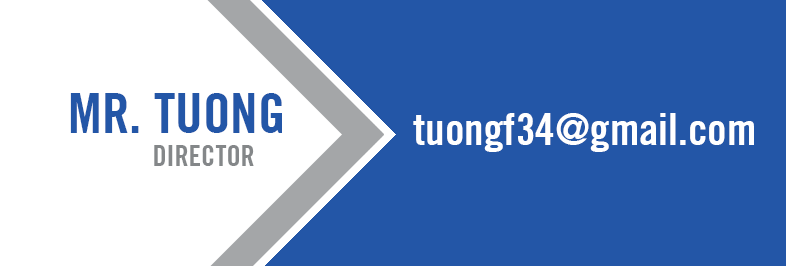
<style>
.page{position:relative;width:786px;height:266px;background:#2356a7}
.page>*{position:absolute;margin:0}
.t1{font:55.2px "SFUTradeGothicBoldCondTwenty";color:#2356a7}
.t2{font:44px "SFUTradeGothicBoldCondTwenty";color:#ffffff}
.t3{font:28.4px "SFUTradeGothicBoldCondTwenty";color:#848789}
</style>
<div class="page">
<p class="t1" style="left:70px;top:93px;width:212px;height:40px">MR. TUONG</p>
<p class="t2" style="left:413px;top:113px;width:341px;height:39px">tuongf34@gmail.com</p>
<p class="t3" style="left:154px;top:145px;width:100px;height:21px">DIRECTOR</p>
</div>
